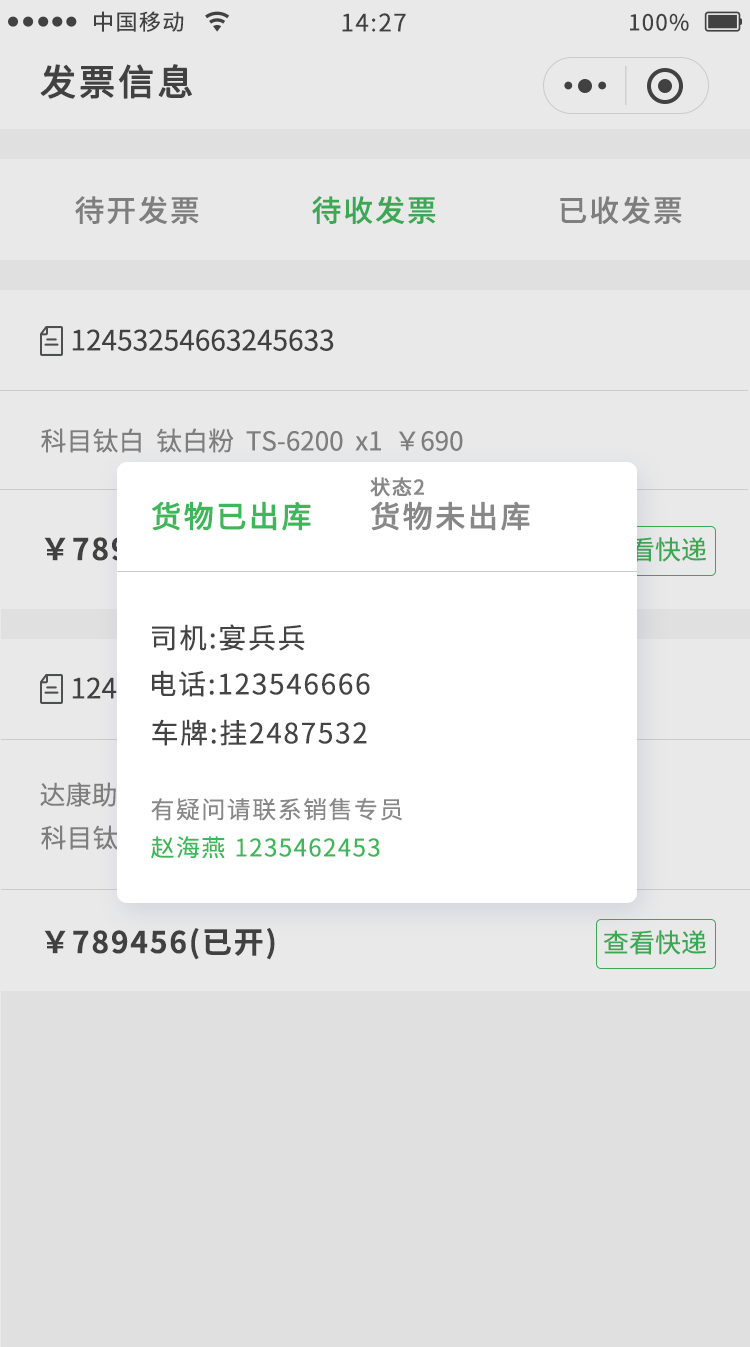
<style>
.page{position:relative;width:750px;height:1347px;background:#e9e9e9}
.page>*{position:absolute;margin:0}
.t1{font:22px "NotoSansCJKsc-Regular";letter-spacing:0.06em;color:#444444}
.t2{font:24px "NotoSansCJKsc-Regular";letter-spacing:0.06em;color:#444444}
.t3{font:36px "NotoSansCJKsc-Regular";letter-spacing:0.06em;color:#444444;font-weight:bold}
.t4{font:30px "NotoSansCJKsc-Medium";letter-spacing:0.06em;color:#888888}
.t5{font:30px "NotoSansCJKsc-Medium";letter-spacing:0.06em;color:#3db858}
.t6{font:28px "NotoSansCJKsc-Regular";color:#444444}
.t7{font:26px "NotoSansCJKsc-Regular";color:#888888}
.t8{font:20px "NotoSansCJKsc-Regular";letter-spacing:0.06em;color:#888888;font-weight:bold}
.t9{font:30px "NotoSansCJKsc-Regular";letter-spacing:0.06em;color:#3db858;font-weight:bold}
.t10{font:30px "NotoSansCJKsc-Regular";letter-spacing:0.06em;color:#888888;font-weight:bold}
.t11{font:30px "NotoSansCJKsc-Bold";letter-spacing:0.06em;color:#ffffff}
.t12{font:26px "NotoSansCJKsc-Regular";color:#3db858}
.t13{font:28px "NotoSansCJKsc-Regular";letter-spacing:0.06em;color:#444444}
.t14{font:24px "NotoSansCJKsc-Regular";letter-spacing:0.06em;color:#888888}
.t15{font:24px "NotoSansCJKsc-Regular";letter-spacing:0.06em;color:#3db858}
.t16{font:30px "NotoSansCJKsc-Bold";letter-spacing:0.06em;color:#444444}
</style>
<div class="page">
<p class="t1" style="left:94px;top:11px;width:90px;height:21px">中国移动</p>
<p class="t2" style="left:342px;top:13px;width:64px;height:19px">14:27</p>
<p class="t1" style="left:630px;top:13px;width:59px;height:18px">100%</p>
<p class="t3" style="left:40px;top:64px;width:152px;height:35px">发票信息</p>
<p class="t4" style="left:75px;top:196px;width:124px;height:28px">待开发票</p>
<p class="t5" style="left:312px;top:196px;width:124px;height:28px">待收发票</p>
<p class="t4" style="left:560px;top:196px;width:122px;height:28px">已收发票</p>
<p class="t6" style="left:72px;top:329px;width:262px;height:22px">12453254663245633</p>
<p class="t7" style="left:41px;top:428px;width:422px;height:25px">科目钛白  钛白粉  TS-6200  x1  ￥690</p>
<p class="t8" style="left:370px;top:477px;width:54px;height:20px">状态2</p>
<p class="t9" style="left:152px;top:501px;width:159px;height:30px">货物已出库</p>
<p class="t10" style="left:371px;top:501px;width:159px;height:30px">货物未出库</p>
<p class="t11" style="left:44px;top:535px;width:231px;height:32px">￥789456(已开)</p>
<p class="t12" style="left:603px;top:537px;width:103px;height:25px">查看快递</p>
<p class="t13" style="left:152px;top:624px;width:153px;height:27px">司机:宴兵兵</p>
<p class="t13" style="left:152px;top:670px;width:218px;height:27px">电话:123546666</p>
<p class="t13" style="left:152px;top:719px;width:215px;height:27px">车牌:挂2487532</p>
<p class="t14" style="left:151px;top:798px;width:251px;height:23px">有疑问请联系销售专员</p>
<p class="t15" style="left:151px;top:836px;width:74px;height:23px">赵海燕</p>
<p class="t15" style="left:236px;top:838px;width:144px;height:19px">1235462453</p>
<p class="t16" style="left:44px;top:928px;width:231px;height:32px">￥789456(已开)</p>
<p class="t12" style="left:603px;top:930px;width:103px;height:25px">查看快递</p>
</div>
